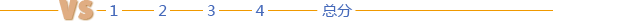
<style>
.page{position:relative;width:630px;height:21px;background:#ffffff}
.page>*{position:absolute;margin:0}
.t1{font:36.1px "Futura-CondensedExtraBold";color:#e0ad82}
.t2{font:15px "MicrosoftYaHei";color:#4569ba}
</style>
<div class="page">
<p class="t1" style="left:59px;top:0px;width:34px;height:19px">vs</p>
<p class="t2" style="left:110px;top:4px;width:243px;height:13px">1         2         3         4             总分</p>
</div>
